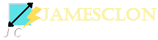
<style>
.page{position:relative;width:158px;height:40px;background:#ffffff}
.page>*{position:absolute;margin:0}
.t1{font:17px "Castellar";color:#fbf3ab;font-weight:bold}
</style>
<div class="page">
<p class="t1" style="left:40px;top:8px;width:117px;height:13px">JamesClon</p>
</div>
